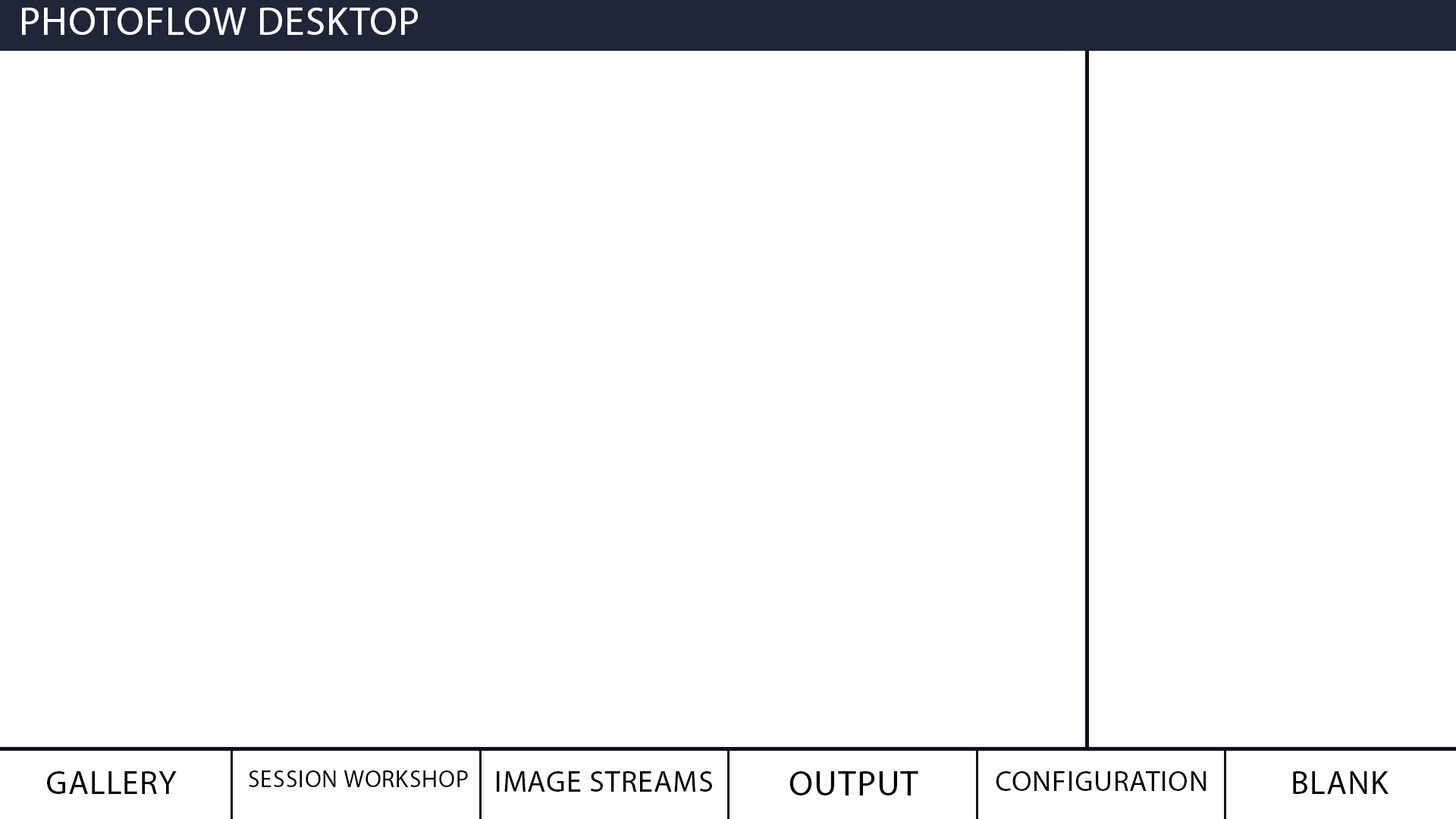
<style>
.page{position:relative;width:1456px;height:819px;background:#ffffff}
.page>*{position:absolute;margin:0}
.t1{font:40.2px "MyriadPro-Regular";letter-spacing:0.025em;color:#ffffff}
.t2{font:33.4px "MyriadPro-Regular";letter-spacing:0.025em;color:#000000}
.t3{font:24.3px "MyriadPro-Regular";letter-spacing:0.025em;color:#000000}
.t4{font:30.3px "MyriadPro-Regular";letter-spacing:0.025em;color:#000000}
.t5{font:35.6px "MyriadPro-Regular";letter-spacing:0.025em;color:#000000}
.t6{font:28.8px "MyriadPro-Regular";letter-spacing:0.025em;color:#000000}
</style>
<div class="page">
<p class="t1" style="left:22px;top:8px;width:396px;height:27px">PHOTOFLOW DESKTOP</p>
<p class="t2" style="left:47px;top:771px;width:130px;height:23px">GALLERY</p>
<p class="t3" style="left:249px;top:770px;width:219px;height:17px">SESSION WORKSHOP</p>
<p class="t4" style="left:497px;top:771px;width:215px;height:21px">IMAGE STREAMS</p>
<p class="t5" style="left:789px;top:771px;width:129px;height:24px">OUTPUT</p>
<p class="t6" style="left:996px;top:771px;width:210px;height:20px">CONFIGURATION</p>
<p class="t2" style="left:1293px;top:771px;width:95px;height:23px">BLANK</p>
</div>
